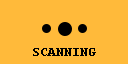
<style>
.page{position:relative;width:128px;height:64px;background:#ffba3a}
.page>*{position:absolute;margin:0}
.t1{font:12.5px "CourierNewPS-BoldMT";color:#000000}
</style>
<div class="page">
<p class="t1" style="left:33px;top:48px;width:63px;height:8px">SCANNING</p>
</div>
